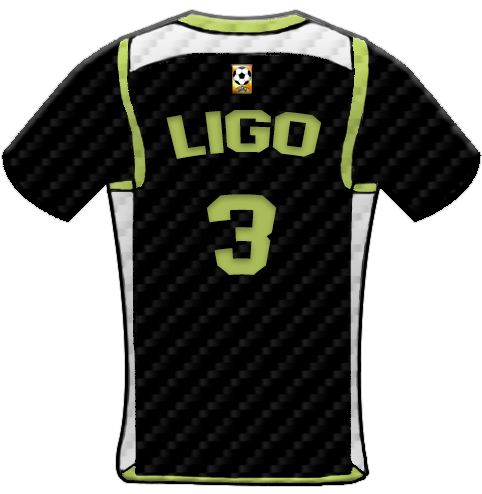
<style>
.page{position:relative;width:482px;height:494px;background:#ffffff}
.page>*{position:absolute;margin:0}
.t1{font:59.4px "AdidasHalfBlock2016";color:#a9bc59;scale:1.13 1}
.t2{font:113.8px "AdidasHalfBlock2016";color:#a9bc59}
</style>
<div class="page">
<p class="t1" style="left:166px;top:110px;width:156px;height:49px">Ligo</p>
<p class="t2" style="left:207px;top:194px;width:70px;height:81px">3</p>
</div>
